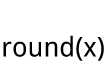
<style>
.page{position:relative;width:105px;height:83px;background:#ffffff}
.page>*{position:absolute;margin:0}
.t1{font:27.2px "DroidSans";color:#000000}
</style>
<div class="page">
<p class="t1" style="left:3px;top:35px;width:101px;height:26px">round(x)</p>
</div>
